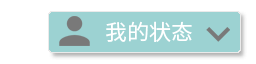
<style>
.page{position:relative;width:256px;height:64px;background:#ffffff}
.page>*{position:absolute;margin:0}
.t1{font:21.6px "NotoSansCJKsc-Regular";color:#ffffff}
</style>
<div class="page">
<p class="t1" style="left:106px;top:21px;width:86px;height:21px">我的状态</p>
</div>
